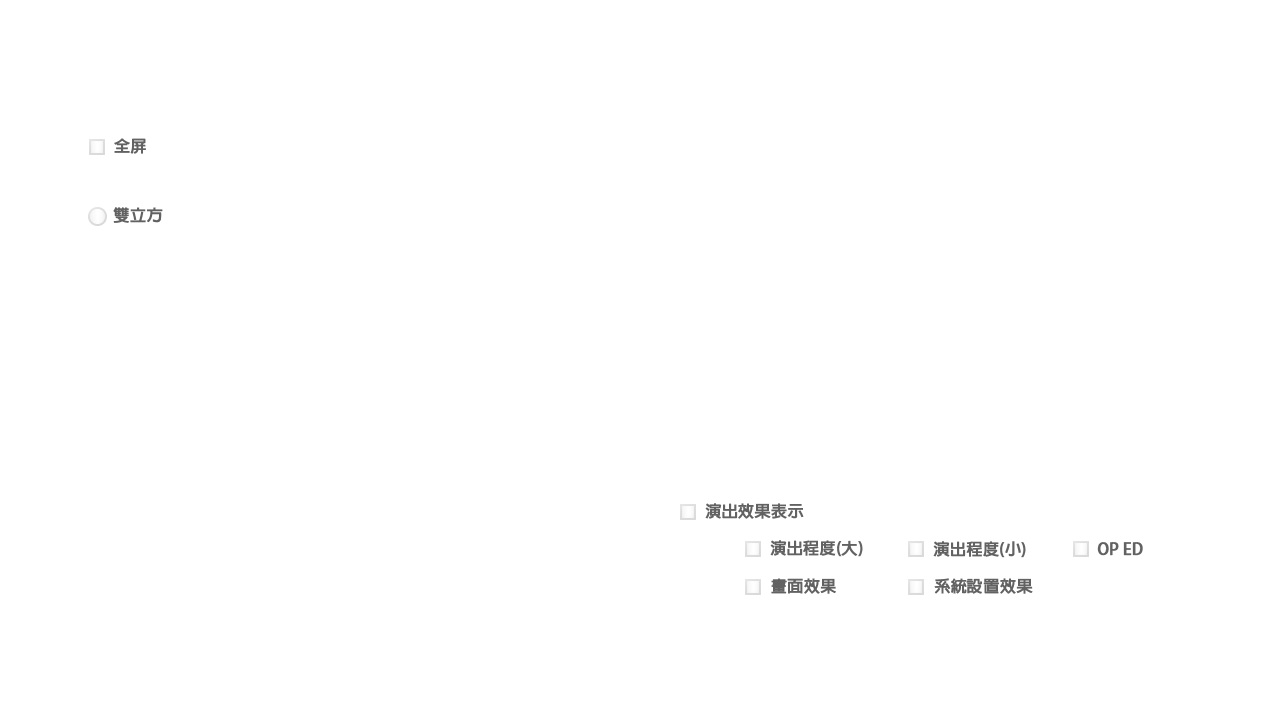
<style>
.page{position:relative;width:1280px;height:720px;background:#ffffff}
.page>*{position:absolute;margin:0}
.t1{font:16px "AdobeFanHeitiStd-Bold";color:#626262;font-weight:bold}
</style>
<div class="page">
<p class="t1" style="left:114px;top:138px;width:32px;height:16px">全屏</p>
<p class="t1" style="left:113px;top:207px;width:50px;height:16px">雙立方</p>
<p class="t1" style="left:705px;top:503px;width:99px;height:16px">演出效果表示</p>
<p class="t1" style="left:770px;top:540px;width:93px;height:17px">演出程度(大)</p>
<p class="t1" style="left:933px;top:541px;width:93px;height:17px">演出程度(小)</p>
<p class="t1" style="left:1097px;top:542px;width:46px;height:14px">OP ED</p>
<p class="t1" style="left:771px;top:578px;width:65px;height:16px">畫面效果</p>
<p class="t1" style="left:934px;top:578px;width:99px;height:16px">系統設置效果</p>
</div>
